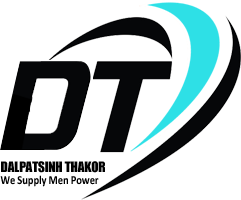
<style>
.page{position:relative;width:241px;height:200px;background:#ffffff}
.page>*{position:absolute;margin:0}
.t1{font:13.1px "Impact";letter-spacing:-0.01em;color:#000000}
.t2{font:12.2px "Calibri-Bold";letter-spacing:-0.01em;color:#000000;scale:0.87 1}
</style>
<div class="page">
<p class="t1" style="left:1px;top:161px;width:104px;height:12px">DALPATSINH THAKOR</p>
<p class="t2" style="left:0px;top:175px;width:99px;height:12px">We Supply Men Power</p>
</div>
